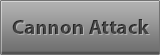
<style>
.page{position:relative;width:160px;height:55px}
.page>*{position:absolute;margin:0}
.t1{font:20.8px "MyriadPro-Bold";color:#444444}
</style>
<div class="page">
<p class="t1" style="left:12px;top:19px;width:138px;height:15px">Cannon Attack</p>
</div>
